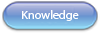
<style>
.page{position:relative;width:100px;height:33px}
.page>*{position:absolute;margin:0}
.t1{font:11.9px "MyriadPro-Regular";color:#ffffff}
</style>
<div class="page">
<p class="t1" style="left:22px;top:10px;width:57px;height:11px">Knowledge</p>
</div>
